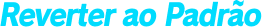
<style>
.page{position:relative;width:262px;height:28px;background:#ffffff}
.page>*{position:absolute;margin:0}
.t1{font:30.5px "RodinPro-EB";letter-spacing:-0.051em;color:#00dcfe;font-style:italic;scale:0.93 1}
</style>
<div class="page">
<p class="t1" style="left:0px;top:0px;width:262px;height:27px">Reverter ao Padrão</p>
</div>
